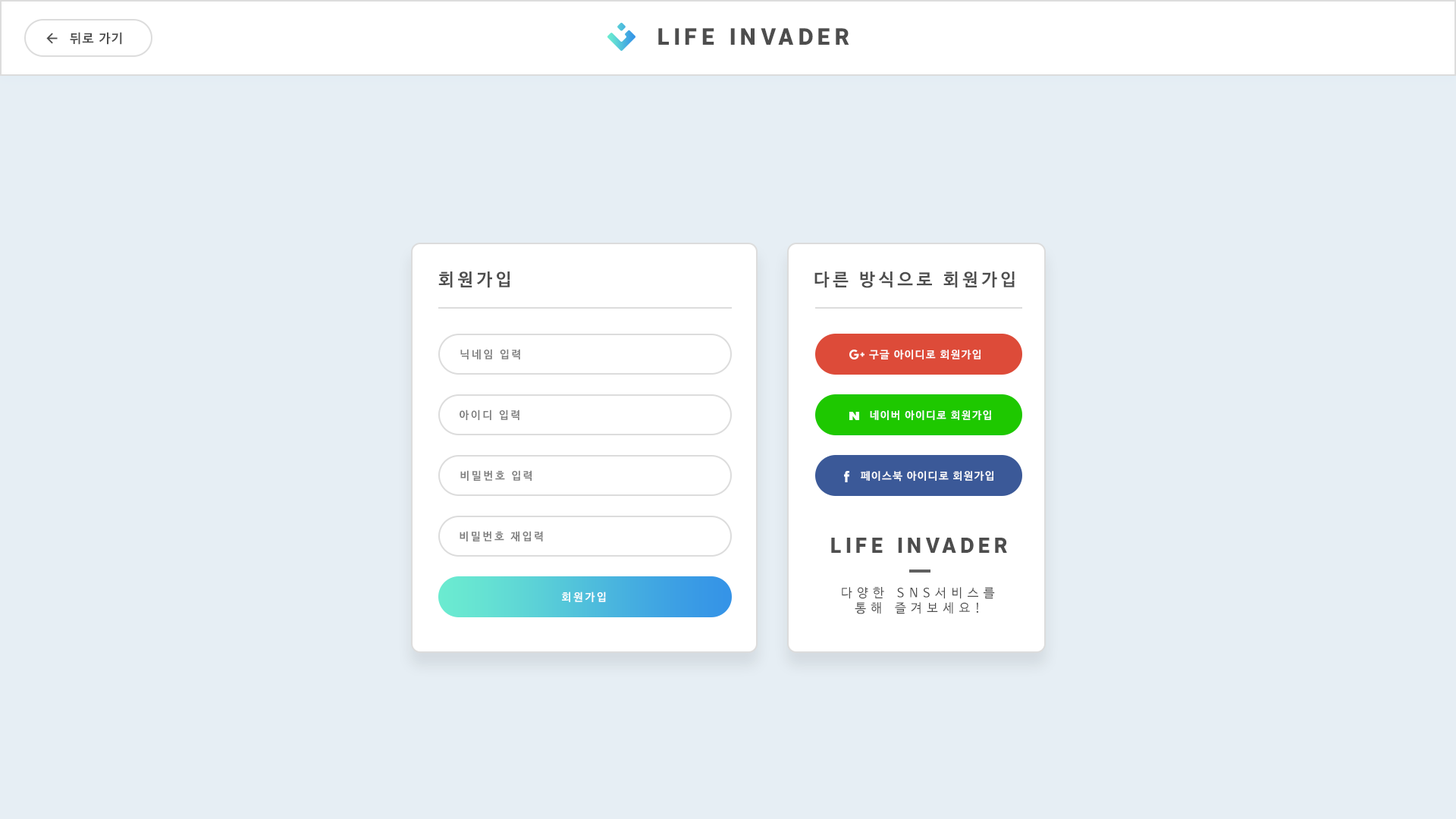
<style>
.page{position:relative;width:1456px;height:819px;background:#e6eef4}
.page>*{position:absolute;margin:0}
.t1{font:22.5px "InterUI-Black";letter-spacing:0.2em;color:#4d4d4d}
.t2{font:12.6px "NanumBarunGothicBold";letter-spacing:0.1em;color:#4d4d4d}
.t3{font:17.5px "NanumBarunGothicBold";letter-spacing:0.2em;color:#4d4d4d}
.t4{font:10.8px "NanumBarunGothicBold";letter-spacing:0.2em;color:#7e7e7e}
.t5{font:10.5px "NanumBarunGothicBold";letter-spacing:0.1em;color:#fefefe}
.t6{font:20.8px "InterUI-Black";letter-spacing:0.2em;color:#4d4d4d}
.t7{font:10.8px "NanumBarunGothicBold";letter-spacing:0.2em;color:#ffffff}
.t8{font:12.4px "NanumBarunGothic";letter-spacing:0.4em;color:#4d4d4d}
</style>
<div class="page">
<p class="t1" style="left:658px;top:28px;width:191px;height:17px">LIFE INVADER</p>
<p class="t2" style="left:70px;top:32px;width:52px;height:13px">뒤로 가기</p>
<p class="t3" style="left:438px;top:271px;width:72px;height:17px">회원가입</p>
<p class="t3" style="left:814px;top:271px;width:201px;height:17px">다른 방식으로 회원가입</p>
<p class="t4" style="left:460px;top:349px;width:60px;height:10px">닉네임 입력</p>
<p class="t5" style="left:869px;top:350px;width:112px;height:9px">구글 아이디로 회원가입</p>
<p class="t4" style="left:460px;top:409px;width:59px;height:11px">아이디 입력</p>
<p class="t5" style="left:870px;top:410px;width:121px;height:10px">네이버 아이디로 회원가입</p>
<p class="t4" style="left:460px;top:470px;width:72px;height:11px">비밀번호 입력</p>
<p class="t5" style="left:861px;top:471px;width:132px;height:11px">페이스북 아이디로 회원가입</p>
<p class="t4" style="left:460px;top:531px;width:83px;height:10px">비밀번호 재입력</p>
<p class="t6" style="left:831px;top:538px;width:176px;height:15px">LIFE INVADER</p>
<p class="t7" style="left:562px;top:591px;width:44px;height:11px">회원가입</p>
<p class="t8" style="left:842px;top:587px;width:153px;height:27px;text-align:center">다양한 SNS서비스를<br>통해 즐겨보세요!</p>
</div>
